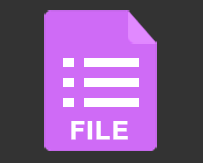
<style>
.page{position:relative;width:203px;height:163px;background:#333333}
.page>*{position:absolute;margin:0}
.t1{font:24.6px "Arial-BoldMT";letter-spacing:0.04em;color:#ffffff;font-weight:bold}
</style>
<div class="page">
<p class="t1" style="left:71px;top:121px;width:57px;height:19px">FILE</p>
</div>
